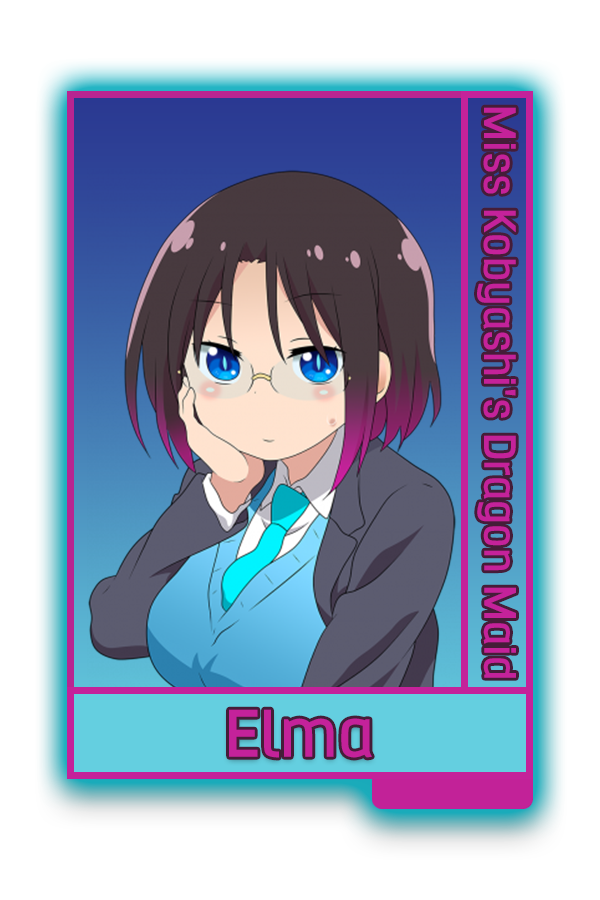
<style>
.page{position:relative;width:600px;height:900px;background:#ffffff}
.page>*{position:absolute;margin:0}
.t1{font:50.5px "Hurufo&NumeroBold";color:#c4229a}
.t2{font:75px "Hurufo&NumeroBold";color:#c4229a}
</style>
<div class="page">
<p class="t1" style="left:477px;top:107px;width:39px;height:571px;rotate:90deg">Miss Kobyashi's Dragon Maid</p>
<p class="t2" style="left:229px;top:709px;width:143px;height:49px">Elma</p>
</div>
